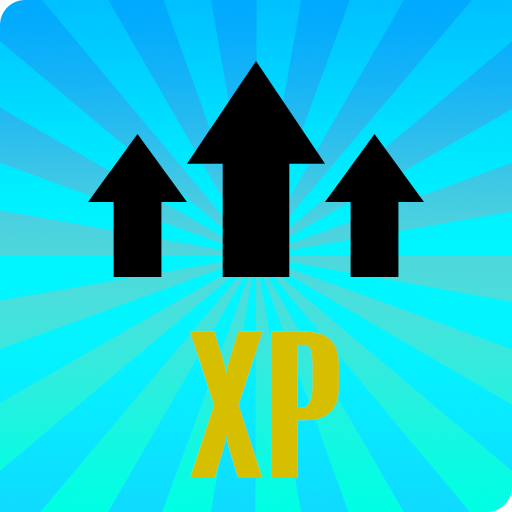
<style>
.page{position:relative;width:512px;height:512px}
.page>*{position:absolute;margin:0}
.t1{font:208.3px "BluefishDemo-Bold";color:#d6bf01}
</style>
<div class="page">
<p class="t1" style="left:190px;top:331px;width:149px;height:147px">XP</p>
</div>
